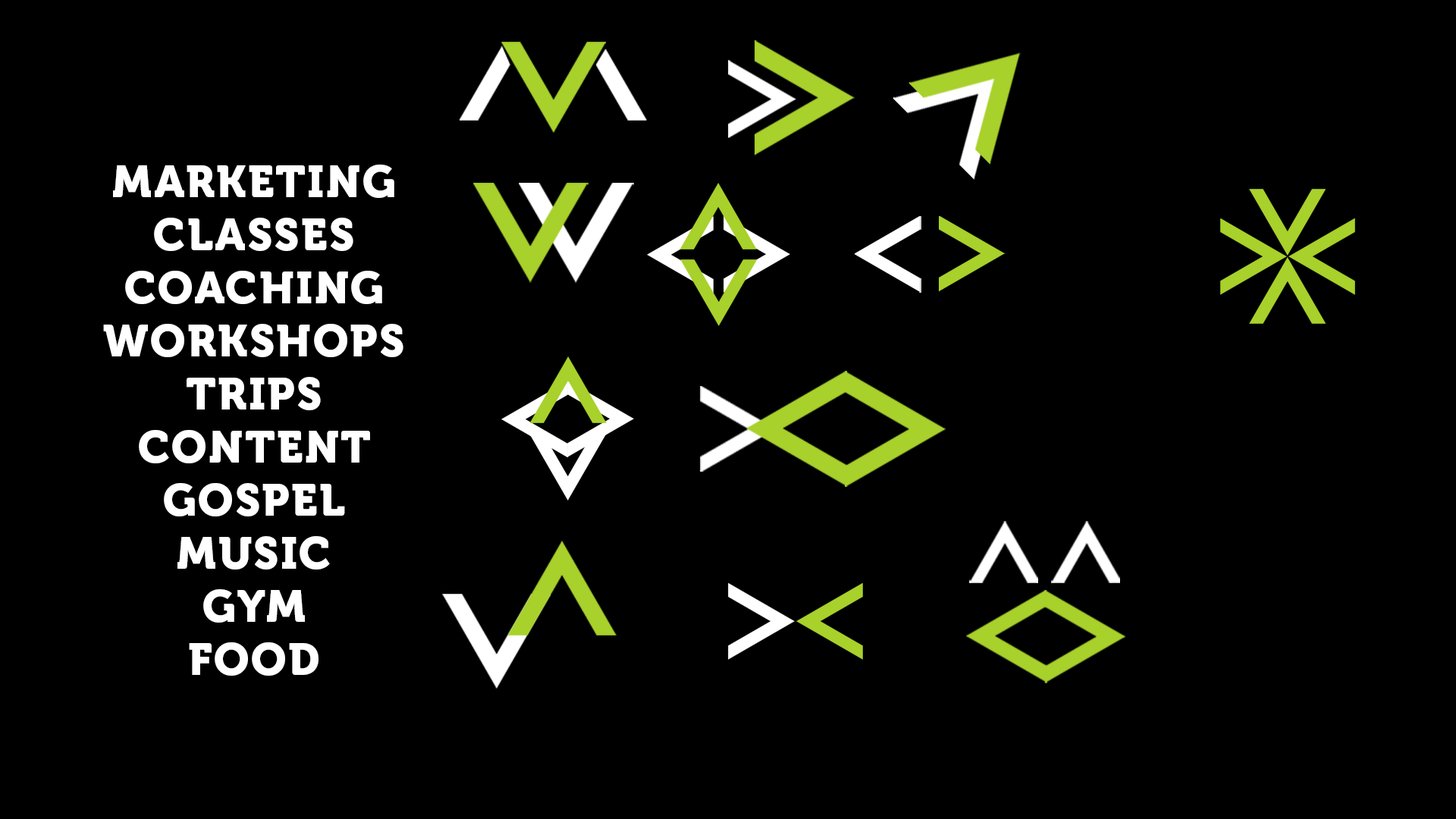
<style>
.page{position:relative;width:1456px;height:819px;background:#000000}
.page>*{position:absolute;margin:0}
.t1{font:44.2px "Museo900-Regular";letter-spacing:0.04em;color:#ffffff}
</style>
<div class="page">
<p class="t1" style="left:103px;top:165px;width:300px;height:511px;text-align:center">MARKETING<br>CLASSES<br>COACHING<br>WORKSHOPS<br>TRIPS<br>CONTENT<br>GOSPEL<br>MUSIC<br>GYM<br>FOOD</p>
</div>
